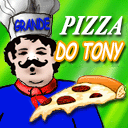
<style>
.page{position:relative;width:128px;height:128px}
.page>*{position:absolute;margin:0}
.t1{font:14.7px "ComicSansMS-Bold";letter-spacing:-0.04em;color:#0116e1;scale:0.6 1}
.t2{font:26.7px "TimesNewRomanPS-BoldItalicMT";letter-spacing:0.02em;color:#ffffff;text-transform:uppercase;font-weight:bold;font-style:italic;scale:0.75 1}
.t3{font:22.3px "ComicSansMS-BoldItalic";color:#ffffff;font-style:italic;scale:0.6 1}
</style>
<div class="page">
<p class="t1" style="left:14px;top:17px;width:36px;height:15px;rotate:-4deg">GRANDE</p>
<p class="t2" style="left:59px;top:16px;width:64px;height:19px">PIZZA</p>
<p class="t3" style="left:56px;top:42px;width:68px;height:18px">DO TONY</p>
</div>
